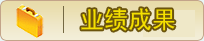
<style>
.page{position:relative;width:204px;height:41px}
.page>*{position:absolute;margin:0}
.t1{font:24px "SimHei";color:#f5e000}
</style>
<div class="page">
<p class="t1" style="left:81px;top:8px;width:94px;height:23px">业绩成果</p>
</div>
